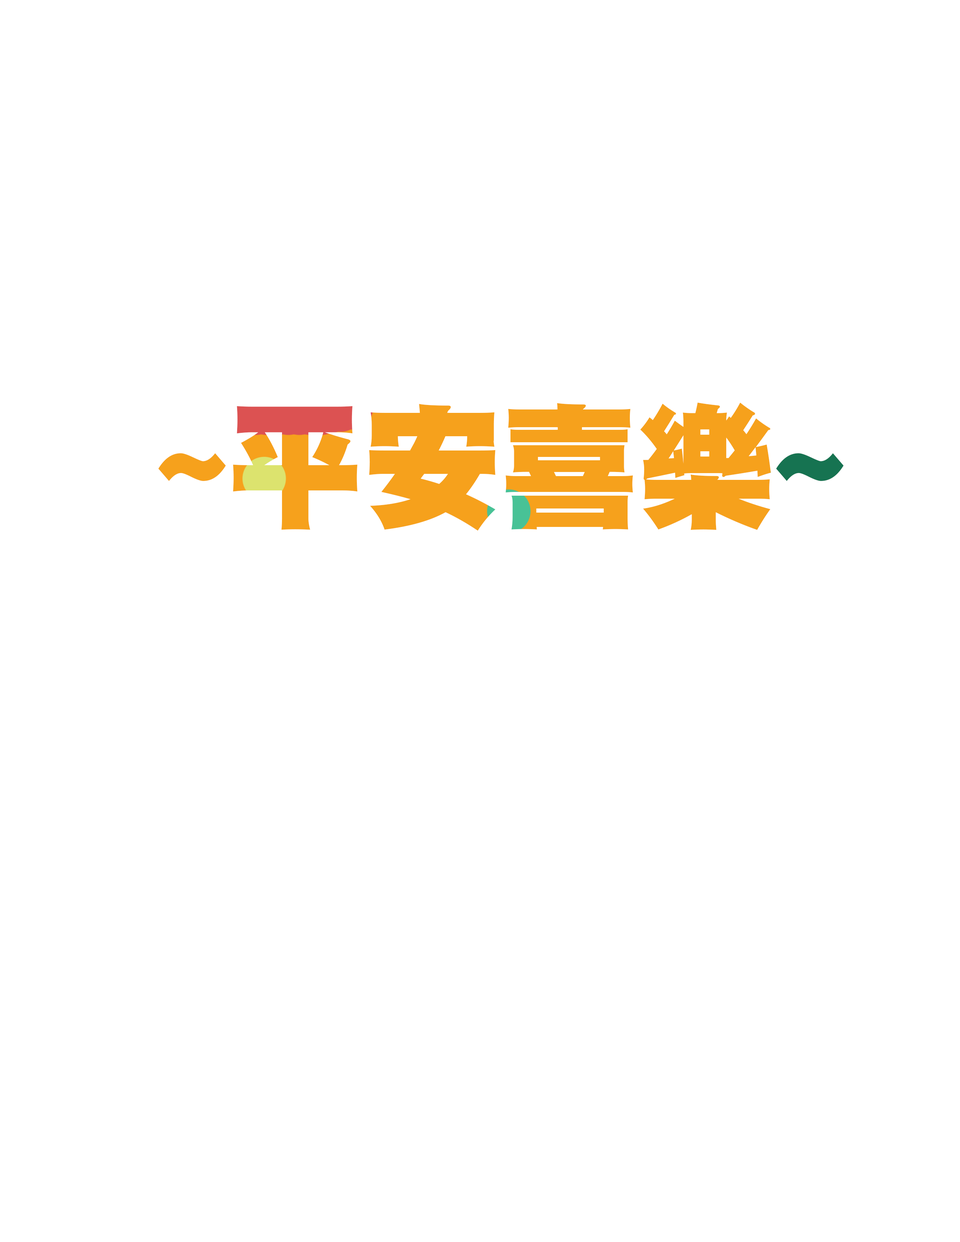
<style>
.page{position:relative;width:960px;height:1242px;background:#ffffff}
.page>*{position:absolute;margin:0}
.t1{font:135.9px "DFHei-W12-WIN-BF";letter-spacing:0.01em;color:#f6a11c}
</style>
<div class="page">
<p class="t1" style="left:158px;top:402px;width:686px;height:129px">~平安喜樂~</p>
</div>
